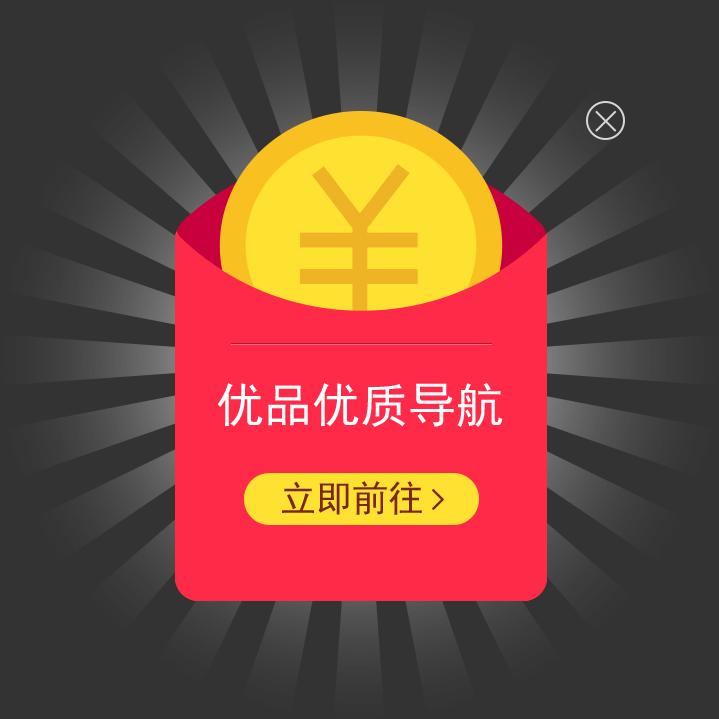
<style>
.page{position:relative;width:719px;height:719px;background:#333333}
.page>*{position:absolute;margin:0}
.t1{font:48px "SimHei";color:#ffffff}
.t2{font:36px "SimHei";color:#7a261b}
</style>
<div class="page">
<p class="t1" style="left:217px;top:382px;width:286px;height:45px">优品优质导航</p>
<p class="t2" style="left:282px;top:481px;width:140px;height:34px">立即前往</p>
</div>
